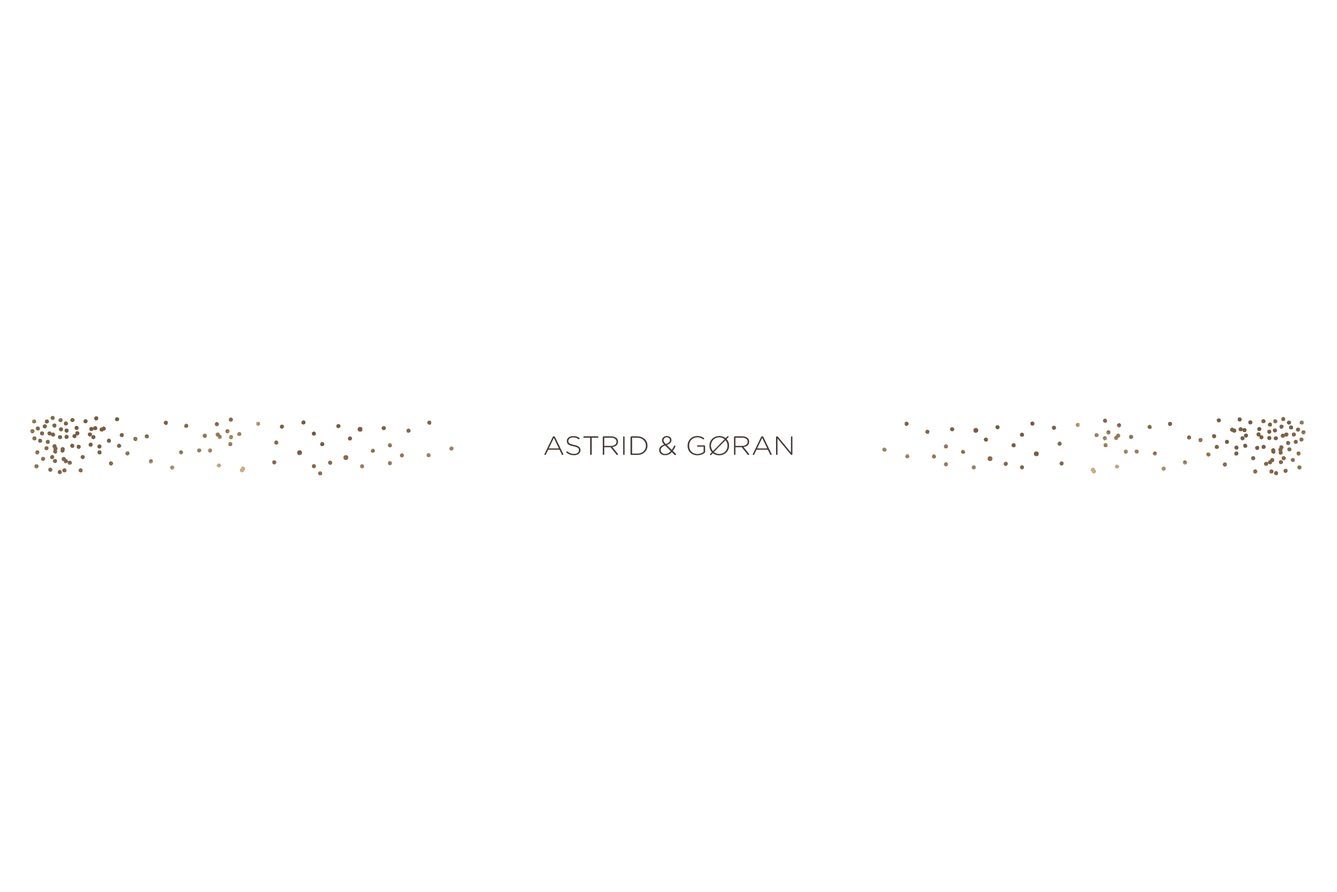
<style>
.page{position:relative;width:1337px;height:892px;background:#ffffff}
.page>*{position:absolute;margin:0}
.t1{font:26.5px "GothamRounded-Light";color:#463935;text-transform:uppercase;scale:1.05 1}
</style>
<div class="page">
<p class="t1" style="left:544px;top:436px;width:249px;height:19px">Astrid &amp; Gøran</p>
</div>
